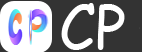
<style>
.page{position:relative;width:142px;height:52px;background:#333333}
.page>*{position:absolute;margin:0}
.t1{font:60px "ComicSansMS";color:#ffffff}
</style>
<div class="page">
<p class="t1" style="left:61px;top:3px;width:64px;height:47px">CP</p>
</div>
